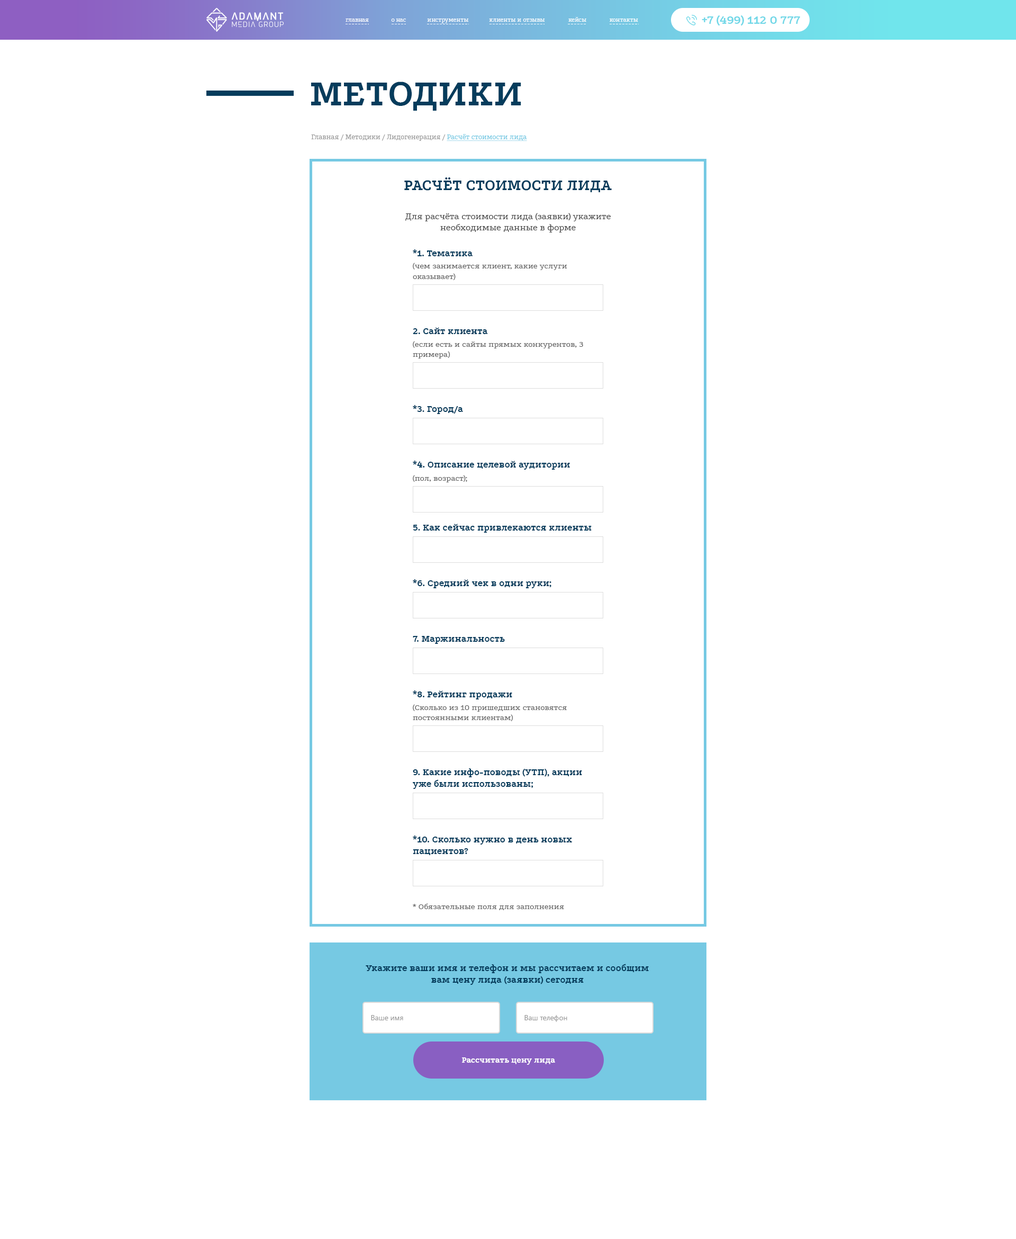
<style>
.page{position:relative;width:1016px;height:1239px;background:#ffffff}
.page>*{position:absolute;margin:0}
.t1{font:6.4px "Podkova-Regular";color:#ffffff}
.t2{font:12.7px "Podkova-Bold";color:#73d8e8}
.t3{font:38.1px "Podkova-Bold";color:#053c5c;text-transform:uppercase}
.t4{font:7.4px "Podkova-Regular";color:#999999}
.t5{font:7.4px "Podkova-Regular";color:#76c9e3;text-decoration:underline}
.t6{font:15.9px "Podkova-Bold";color:#053c5c;text-transform:uppercase}
.t7{font:9.5px "Podkova-Regular";color:#444444}
.t8{font:9.5px "Podkova-Bold";letter-spacing:0.01em;color:#053c5c}
.t9{font:8.5px "Podkova-Regular";letter-spacing:0.01em;color:#666666}
.t10{font:7.4px "SegoeUI";color:#999999}
.t11{font:8.5px "Podkova-ExtraBold";color:#ffffff}
</style>
<div class="page">
<p class="t1" style="left:569px;top:17px;width:18px;height:5px">кейсы</p>
<p class="t2" style="left:702px;top:15px;width:98px;height:11px">+7 (499) 112 0 777</p>
<p class="t1" style="left:346px;top:19px;width:23px;height:3px">главная</p>
<p class="t1" style="left:391px;top:19px;width:15px;height:3px">о нас</p>
<p class="t1" style="left:427px;top:19px;width:42px;height:4px">инструменты</p>
<p class="t1" style="left:489px;top:19px;width:56px;height:3px">клиенты и отзывы</p>
<p class="t1" style="left:610px;top:19px;width:28px;height:3px">контакты</p>
<p class="t3" style="left:311px;top:82px;width:210px;height:29px">методики</p>
<p class="t4" style="left:311px;top:134px;width:216px;height:7px">Главная / Методики / Лидогенерация / <span class="t5">Расчёт стоимости лида</span></p>
<p class="t6" style="left:404px;top:177px;width:208px;height:15px">Расчёт стоимости лида</p>
<p class="t7" style="left:406px;top:213px;width:205px;height:19px;text-align:center">Для расчёта стоимости лида (заявки) укажите необходимые данные в форме</p>
<p class="t8" style="left:413px;top:249px;width:60px;height:7px">*1. Тематика</p>
<p class="t9" style="left:413px;top:263px;width:155px;height:18px">(чем занимается клиент, какие услуги оказывает)</p>
<p class="t8" style="left:413px;top:327px;width:75px;height:7px">2. Сайт клиента</p>
<p class="t9" style="left:413px;top:341px;width:170px;height:17px">(если есть и сайты прямых конкурентов, 3 примера)</p>
<p class="t8" style="left:413px;top:405px;width:50px;height:9px">*3. Город/а</p>
<p class="t8" style="left:413px;top:461px;width:157px;height:9px">*4. Описание целевой аудитории</p>
<p class="t9" style="left:413px;top:475px;width:54px;height:7px">(пол, возраст);</p>
<p class="t8" style="left:413px;top:524px;width:179px;height:9px">5. Как сейчас привлекаются клиенты</p>
<p class="t8" style="left:413px;top:579px;width:139px;height:9px">*6. Средний чек в одни руки;</p>
<p class="t8" style="left:413px;top:636px;width:92px;height:8px">7. Маржинальность</p>
<p class="t8" style="left:413px;top:690px;width:99px;height:9px">*8. Рейтинг продажи</p>
<p class="t9" style="left:413px;top:704px;width:154px;height:18px">(Сколько из 10 пришедших становятся постоянными клиентам)</p>
<p class="t8" style="left:413px;top:768px;width:169px;height:21px">9. Какие инфо-поводы (УТП), акции<br>уже были использованы;</p>
<p class="t8" style="left:413px;top:835px;width:159px;height:20px">*10. Сколько нужно в день новых<br>пациентов?</p>
<p class="t9" style="left:413px;top:903px;width:151px;height:7px">* Обязательные поля для заполнения</p>
<p class="t8" style="left:366px;top:964px;width:283px;height:21px;text-align:center">Укажите ваши имя и телефон и мы рассчитаем и сообщим вам цену лида (заявки) сегодня</p>
<p class="t10" style="left:371px;top:1015px;width:32px;height:5px">Ваше имя</p>
<p class="t10" style="left:525px;top:1015px;width:43px;height:7px">Ваш телефон</p>
<p class="t11" style="left:462px;top:1057px;width:93px;height:8px">Рассчитать цену лида</p>
</div>
